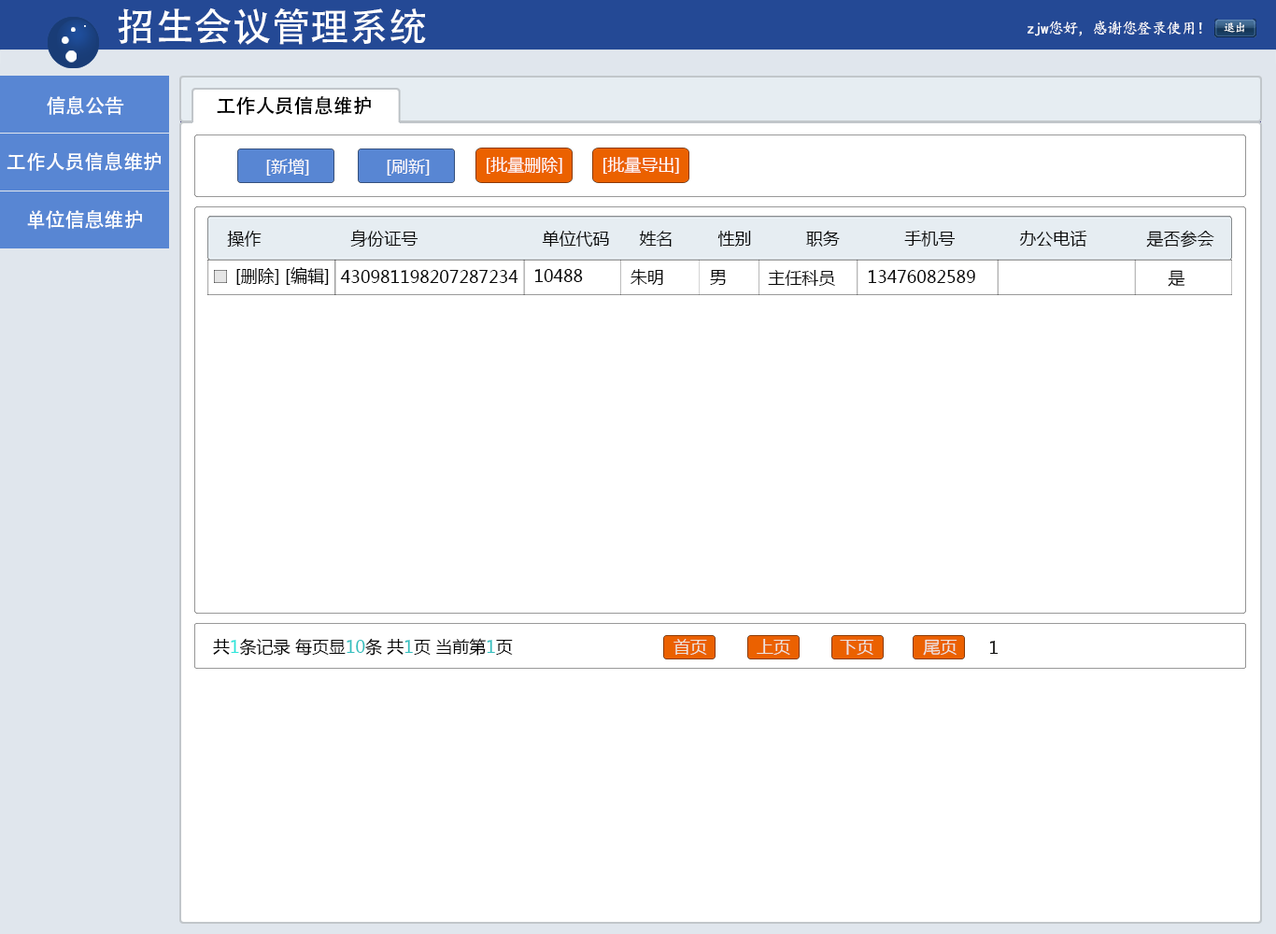
<style>
.page{position:relative;width:1276px;height:934px;background:#ffffff}
.page>*{position:absolute;margin:0}
.t1{font:38.9px "AdobeHeitiStd-Regular";color:#ffffff}
.t2{font:15.6px "KaiTi";letter-spacing:-0.05em;color:#ffffff}
.t3{font:11.7px "KaiTi";letter-spacing:-0.05em;color:#ffffff}
.t4{font:19.5px "AdobeHeitiStd-Regular";color:#fefefe}
.t5{font:19.5px "AdobeHeitiStd-Regular";color:#000000}
.t6{font:16.8px "MicrosoftYaHei";color:#fffbfb}
.t7{font:16.8px "MicrosoftYaHei";color:#070707}
.t8{font:16.8px "MicrosoftYaHei";color:#030303}
.t9{font:16.8px "MicrosoftYaHei";color:#000000}
.t10{font:16.8px "MicrosoftYaHei";color:#2be5da}
.t11{font:16.8px "MicrosoftYaHei";color:#33bfbf}
.t12{font:16.8px "MicrosoftYaHei";color:#0d0d0c}
</style>
<div class="page">
<p class="t1" style="left:118px;top:7px;width:308px;height:38px">招生会议管理系统</p>
<p class="t2" style="left:1028px;top:21px;width:174px;height:15px">zjw您好，感谢您登录使用！</p>
<p class="t3" style="left:1224px;top:22px;width:21px;height:11px">退出</p>
<p class="t4" style="left:47px;top:96px;width:77px;height:19px">信息公告</p>
<p class="t5" style="left:217px;top:96px;width:154px;height:19px">工作人员信息维护</p>
<p class="t4" style="left:7px;top:152px;width:155px;height:19px">工作人员信息维护</p>
<p class="t6" style="left:266px;top:159px;width:43px;height:17px">[新增]</p>
<p class="t6" style="left:387px;top:159px;width:43px;height:17px">[刷新]</p>
<p class="t6" style="left:487px;top:157px;width:75px;height:17px">[批量删除]</p>
<p class="t6" style="left:604px;top:157px;width:75px;height:17px">[批量导出]</p>
<p class="t4" style="left:27px;top:210px;width:115px;height:20px">单位信息维护</p>
<p class="t7" style="left:227px;top:230px;width:988px;height:18px">操作                  身份证号                         单位代码      姓名         性别           职务             手机号             办公电话            是否参会</p>
<p class="t7" style="left:236px;top:267px;width:93px;height:18px">[删除] [编辑]</p>
<p class="t7" style="left:535px;top:269px;width:48px;height:13px">10488</p>
<p class="t7" style="left:631px;top:269px;width:32px;height:16px">朱明</p>
<p class="t7" style="left:340px;top:270px;width:179px;height:13px">430981198207287234</p>
<p class="t7" style="left:710px;top:270px;width:16px;height:15px">男</p>
<p class="t7" style="left:768px;top:270px;width:67px;height:16px">主任科员</p>
<p class="t7" style="left:869px;top:270px;width:106px;height:13px">13476082589</p>
<p class="t7" style="left:1168px;top:270px;width:18px;height:17px">是</p>
<p class="t8" style="left:213px;top:638px;width:300px;height:18px"><span class="t9">共</span><span class="t10">1</span>条记录 每页显<span class="t11">10</span>条 共<span class="t11">1</span>页 当前第<span class="t11">1</span>页</p>
<p class="t12" style="left:990px;top:641px;width:9px;height:13px">1</p>
</div>
